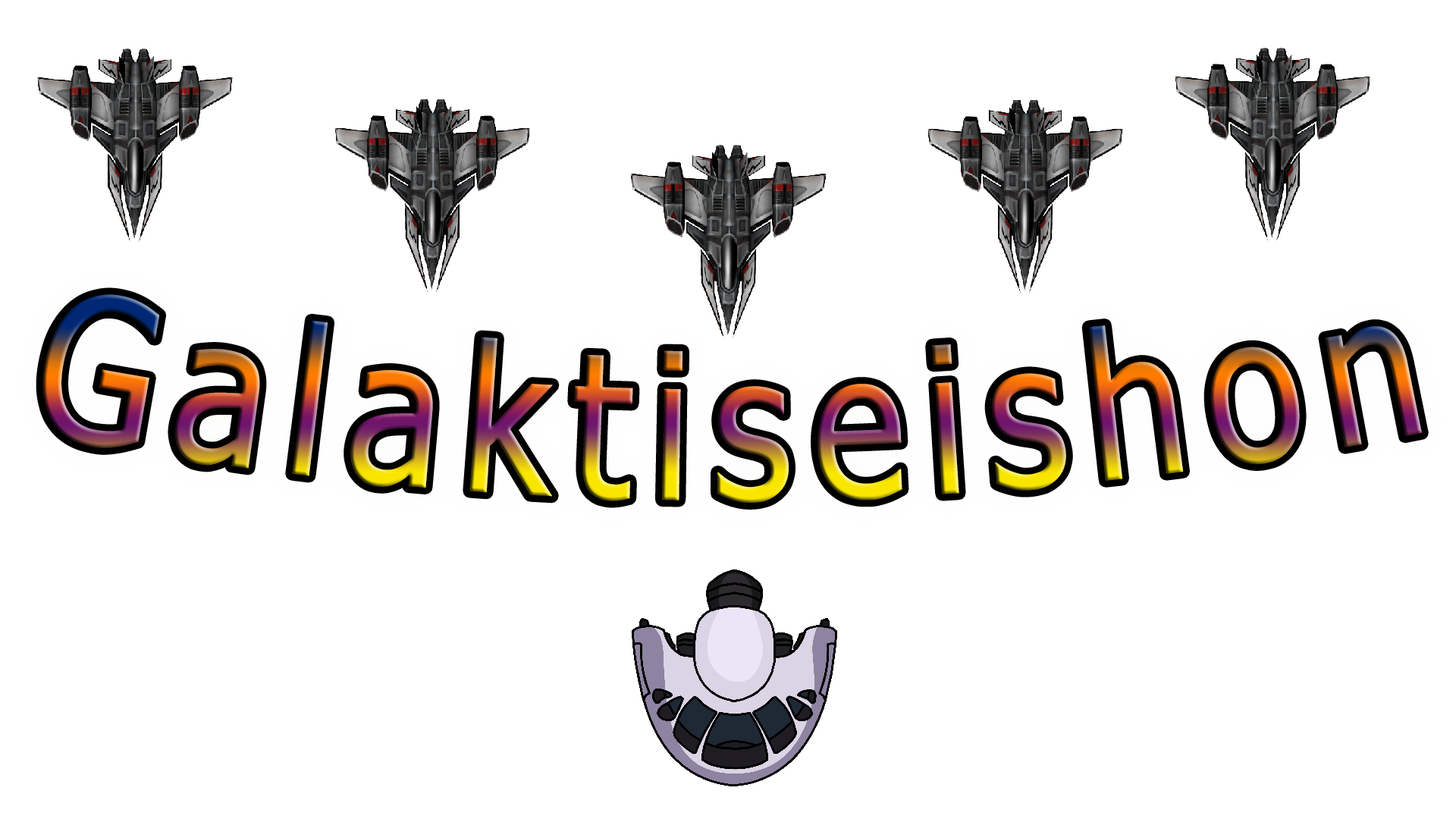
<style>
.page{position:relative;width:1456px;height:819px;background:#ffffff}
.page>*{position:absolute;margin:0}
.t1{font:198.8px "Tahoma";letter-spacing:0.115em;scale:0.91 1}
</style>
<div class="page">
<p class="t1" style="left:42px;top:294px;width:1380px;height:209px">Galaktiseishon</p>
</div>
